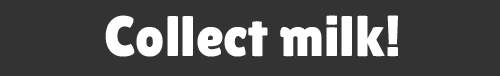
<style>
.page{position:relative;width:500px;height:76px;background:#333333}
.page>*{position:absolute;margin:0}
.t1{font:57px "LilitaOne";color:#ffffff}
</style>
<div class="page">
<p class="t1" style="left:105px;top:15px;width:293px;height:42px">Collect milk!</p>
</div>
